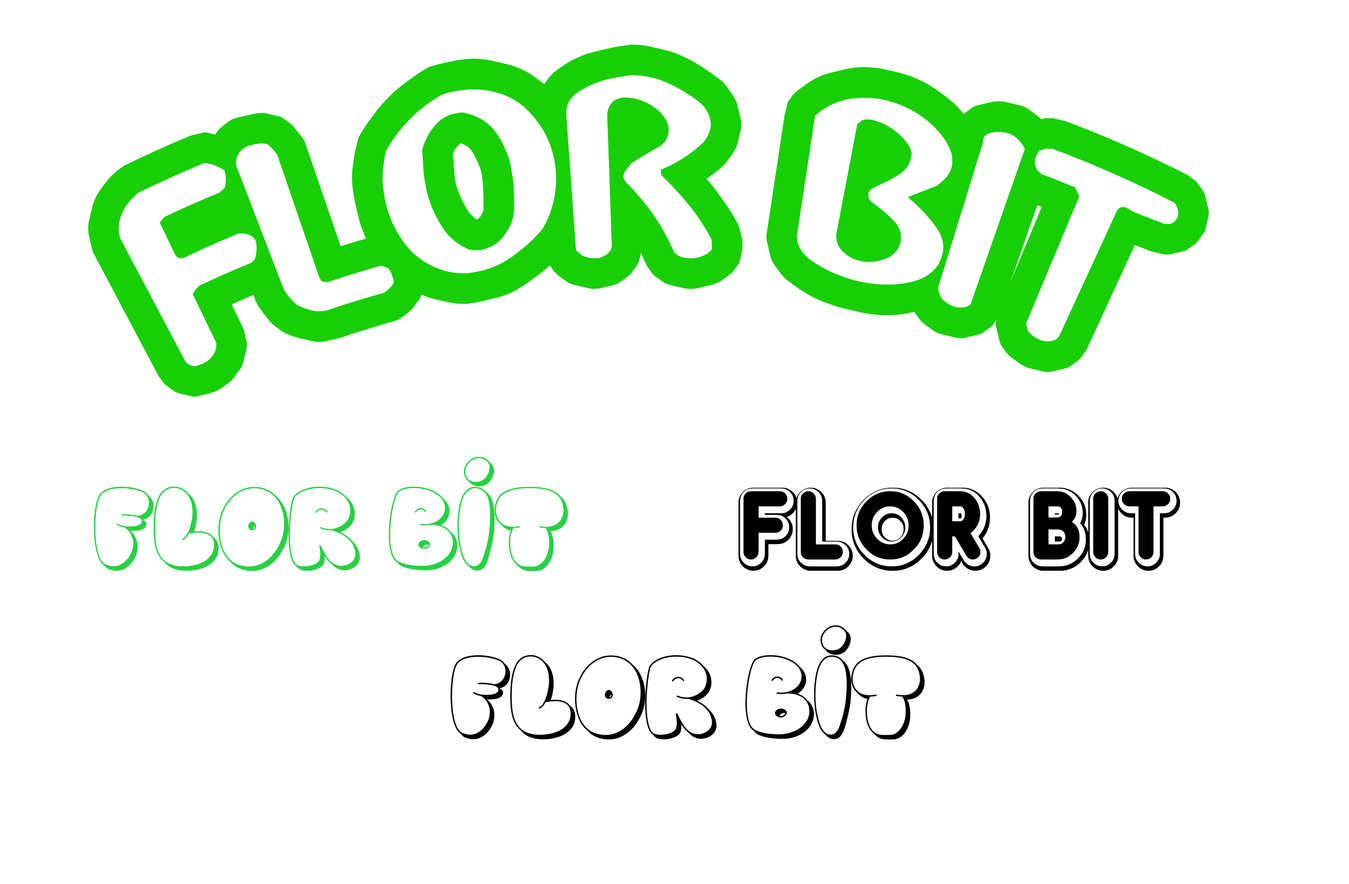
<style>
.page{position:relative;width:1349px;height:884px;background:#ffffff}
.page>*{position:absolute;margin:0}
.t1{font:275px "Abbey-Medium";color:#ffffff}
.t2{font:27.7px "DoubleBubbleShadow";color:#000000}
.t3{font:27.7px "Happybrowncatshadow";color:#000000}
</style>
<div class="page">
<p class="t1" style="left:119px;top:75px;width:1060px;height:291px">FLOR BIT</p>
<p class="t2" style="left:739px;top:488px;width:441px;height:83px">FLOR BIT</p>
<p class="t3" style="left:451px;top:625px;width:474px;height:115px">FLOR BIT</p>
</div>
